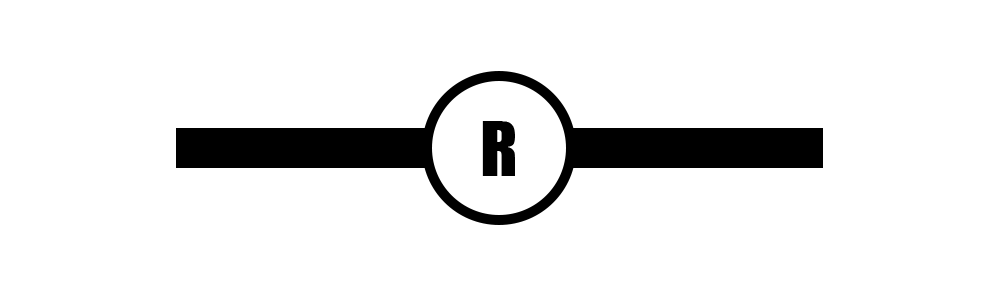
<style>
.page{position:relative;width:1000px;height:300px;background:#ffffff}
.page>*{position:absolute;margin:0}
.t1{font:70px "Impact";color:#000000}
</style>
<div class="page">
<p class="t1" style="left:482px;top:121px;width:33px;height:55px">R</p>
</div>
